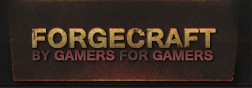
<style>
.page{position:relative;width:252px;height:88px}
.page>*{position:absolute;margin:0}
.t1{font:33.4px "Tunga-Bold"}
.t2{font:17.1px "Tunga-Bold";color:#7e4444}
.t3{font:17.1px "Tunga-Bold";color:#553c3c}
</style>
<div class="page">
<p class="t1" style="left:32px;top:28px;width:184px;height:20px">FORGECRAFT</p>
<p class="t2" style="left:32px;top:50px;width:181px;height:11px"><span class="t3">BY </span>GAMERS <span class="t3">FOR </span>GAMERS</p>
</div>
